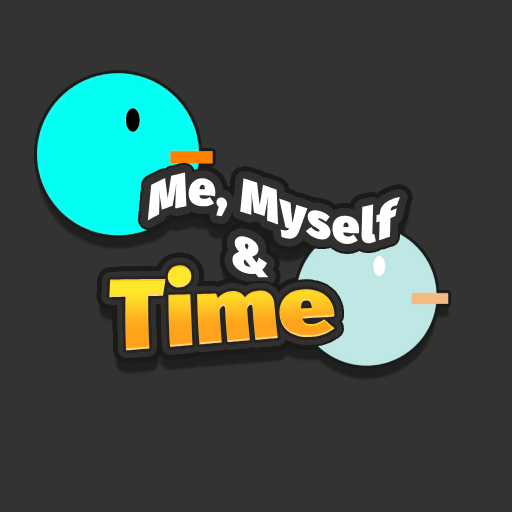
<style>
.page{position:relative;width:512px;height:512px;background:#333333}
.page>*{position:absolute;margin:0}
.t1{font:48.6px "FiraSans-Ultra";letter-spacing:0.025em;color:#ffffff}
.t2{font:77.8px "FiraSans-Ultra";letter-spacing:0.01em;scale:1.25 1}
</style>
<div class="page">
<p class="t1" style="left:147px;top:172px;width:253px;height:106px;rotate:2deg">Me, Myself <br>  &amp;</p>
<p class="t2" style="left:109px;top:265px;width:226px;height:86px">Time</p>
</div>
